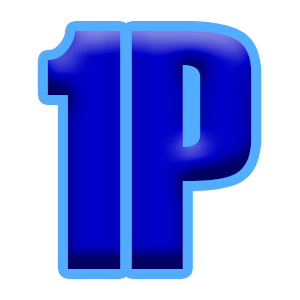
<style>
.page{position:relative;width:300px;height:300px;background:#ffffff}
.page>*{position:absolute;margin:0}
.t1{font:340.3px "Haettenschweiler";color:#0000c8}
</style>
<div class="page">
<p class="t1" style="left:47px;top:31px;width:205px;height:238px">1P</p>
</div>
